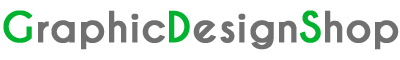
<style>
.page{position:relative;width:400px;height:60px;background:#ffffff}
.page>*{position:absolute;margin:0}
.t1{font:40px "CaviarDreams-Bold";color:#707070;font-weight:bold}
.t2{font:40px "CaviarDreams-Bold";color:#00b22d;font-weight:bold}
</style>
<div class="page">
<p class="t1" style="left:3px;top:10px;width:396px;height:40px"><span class="t2">G</span>raphic<span class="t2">D</span>esign<span class="t2">S</span>hop</p>
</div>
